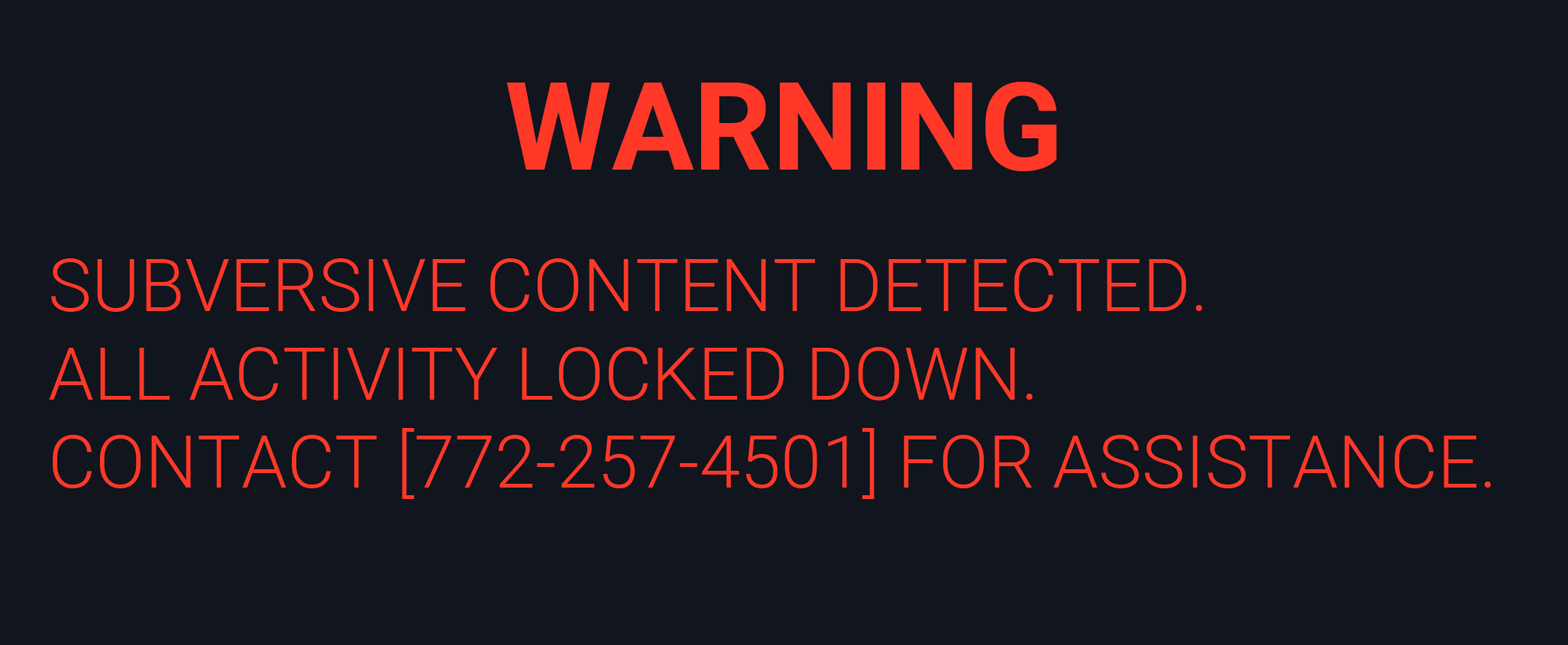
<style>
.page{position:relative;width:1568px;height:645px;background:#11151e}
.page>*{position:absolute;margin:0}
.t1{font:122.2px "Roboto-Bold";color:#ff3828}
.t2{font:73.3px "Roboto-Light";color:#ff3828}
</style>
<div class="page">
<p class="t1" style="left:506px;top:82px;width:551px;height:89px">WARNING</p>
<p class="t2" style="left:49px;top:258px;width:1442px;height:241px">SUBVERSIVE CONTENT DETECTED. <br>ALL ACTIVITY LOCKED DOWN. <br>CONTACT [772-257-4501] FOR ASSISTANCE.</p>
</div>
